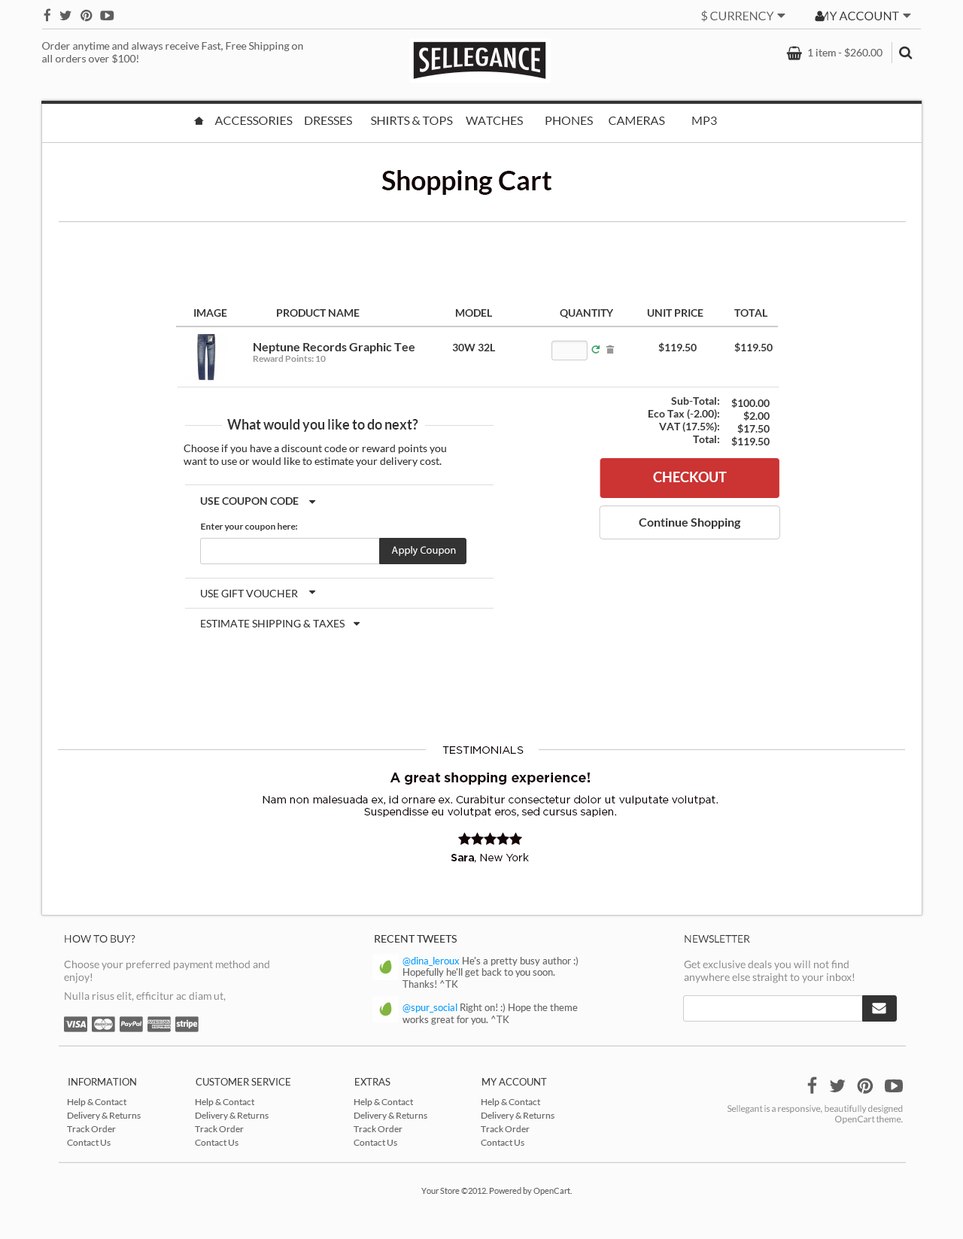
<style>
.page{position:relative;width:963px;height:1239px;background:#ffffff}
.page>*{position:absolute;margin:0}
.t1{font:12px "Lato-Regular";color:#5e5e5e;text-transform:uppercase}
.t2{font:12px "Lato-Regular";color:#333333;text-transform:uppercase}
.t3{font:10.5px "Lato-Regular";color:#666666}
.t4{font:27.1px "Lato-Bold";color:#140606}
.t5{font:10.5px "Lato-Bold";color:#333333}
.t6{font:12px "Lato-Bold";color:#333333}
.t7{font:9px "Lato-Bold";color:#999999}
.t8{font:13.5px "Lato-Bold";color:#333333}
.t9{font:10.5px "Lato-Regular";color:#333333}
.t10{font:13.5px "Lato-Bold";color:#ffffff}
.t11{font:10.5px "Lato-Bold";color:#333333;text-transform:uppercase}
.t12{font:9px "Lato-Bold";color:#333333}
.t13{font:10.5px "MyriadPro-Regular";color:#ffffff}
.t14{font:10.5px "Lato-Regular";color:#333333;text-transform:uppercase}
.t15{font:10.5px "Gotham-Book";color:#140606}
.t16{font:13.5px "Gotham-Bold";color:#140606}
.t17{font:10.5px "Gotham-Bold";color:#140606}
.t18{font:10.5px "Lato-Regular";color:#878787}
.t19{font:9.8px "Lato-Regular";color:#666666}
.t20{font:9.8px "Lato-Regular";color:#00a2ff}
.t21{font:9.8px "Lato-Regular";color:#434343}
.t22{font:9px/13.5px "Lato-Regular";color:#666666}
.t23{font:9px "Lato-Regular";color:#878787}
.t24{font:8.3px "Lato-Regular";color:#636363}
</style>
<div class="page">
<p class="t1" style="left:701px;top:10px;width:73px;height:12px">$ currency</p>
<p class="t2" style="left:819px;top:11px;width:80px;height:9px">My Account</p>
<p class="t3" style="left:42px;top:42px;width:261px;height:21px">Order anytime and always receive Fast, Free Shipping on all orders over $100!</p>
<p class="t3" style="left:808px;top:48px;width:74px;height:9px">1 item - $260.00</p>
<p class="t2" style="left:214px;top:117px;width:79px;height:8px">accessories</p>
<p class="t2" style="left:305px;top:117px;width:47px;height:8px">dresses</p>
<p class="t2" style="left:371px;top:117px;width:82px;height:8px">shirts &amp; tops</p>
<p class="t2" style="left:466px;top:117px;width:57px;height:8px">watches</p>
<p class="t2" style="left:545px;top:117px;width:48px;height:8px">Phones</p>
<p class="t2" style="left:608px;top:117px;width:57px;height:8px">Cameras</p>
<p class="t2" style="left:692px;top:117px;width:25px;height:8px">MP3</p>
<p class="t4" style="left:381px;top:170px;width:171px;height:25px">Shopping Cart</p>
<p class="t5" style="left:194px;top:309px;width:33px;height:8px">IMAGE</p>
<p class="t5" style="left:277px;top:309px;width:82px;height:8px">PRODUCT NAME</p>
<p class="t5" style="left:455px;top:309px;width:38px;height:8px">MODEL</p>
<p class="t5" style="left:560px;top:309px;width:53px;height:9px">QUANTITY</p>
<p class="t5" style="left:647px;top:309px;width:56px;height:8px">UNIT PRICE</p>
<p class="t5" style="left:734px;top:309px;width:34px;height:8px">TOTAL</p>
<p class="t6" style="left:253px;top:343px;width:162px;height:10px">Neptune Records Graphic Tee</p>
<p class="t5" style="left:452px;top:344px;width:44px;height:7px">30W 32L</p>
<p class="t5" style="left:658px;top:342px;width:38px;height:10px">$119.50</p>
<p class="t5" style="left:734px;top:342px;width:38px;height:10px">$119.50</p>
<p class="t7" style="left:253px;top:355px;width:73px;height:7px">Reward Points: 10</p>
<p class="t5" style="left:648px;top:397px;width:71px;height:46px;text-align:right">Sub-Total:<br>Eco Tax (-2.00):<br>VAT (17.5%):<br>Total:</p>
<p class="t5" style="left:731px;top:398px;width:38px;height:48px;text-align:right">$100.00<br>$2.00<br>$17.50<br>$119.50</p>
<p class="t8" style="left:227px;top:419px;width:191px;height:13px">What would you like to do next?</p>
<p class="t9" style="left:184px;top:444px;width:262px;height:22px">Choose if you have a discount code or reward points you want to use or would like to estimate your delivery cost.</p>
<p class="t10" style="left:653px;top:472px;width:74px;height:10px">CHECKOUT</p>
<p class="t11" style="left:200px;top:497px;width:99px;height:8px">Use coupon code</p>
<p class="t6" style="left:639px;top:518px;width:102px;height:11px">Continue Shopping</p>
<p class="t12" style="left:201px;top:523px;width:96px;height:8px">Enter your coupon here:</p>
<p class="t13" style="left:391px;top:546px;width:65px;height:10px">Apply Coupon</p>
<p class="t14" style="left:201px;top:590px;width:97px;height:7px">Use Gift Voucher</p>
<p class="t14" style="left:201px;top:620px;width:143px;height:7px">Estimate Shipping &amp; Taxes</p>
<p class="t15" style="left:442px;top:746px;width:81px;height:8px">TESTIMONIALS</p>
<p class="t16" style="left:390px;top:772px;width:200px;height:12px">A great shopping experience!</p>
<p class="t15" style="left:262px;top:795px;width:455px;height:22px;text-align:center">Nam non malesuada ex, id ornare ex. Curabitur consectetur dolor ut vulputate volutpat. Suspendisse eu volutpat eros, sed cursus sapien.</p>
<p class="t15" style="left:450px;top:853px;width:79px;height:10px"><span class="t17">Sara</span>, New York</p>
<p class="t18" style="left:64px;top:935px;width:205px;height:66px"><span class="t9">HOW TO BUY?<br></span><br>Choose your preferred payment method and enjoy!<br>Nulla risus elit, efficitur ac diam ut, sollicitudin bibendum lorem. Vivamus quis sem metus.</p>
<p class="t9" style="left:375px;top:935px;width:82px;height:7px">RECENT TWEETS</p>
<p class="t18" style="left:684px;top:935px;width:170px;height:48px"><span class="t9">NEWSLETTER<br></span><br>Get exclusive deals you will not find anywhere else straight to your inbox!</p>
<p class="t19" style="left:402px;top:956px;width:176px;height:68px"><span class="t20">@dina_leroux </span>He's a pretty busy author :) Hopefully he'll get back to you soon. Thanks! ^TK<br><br><span class="t20">@spur_social </span>Right on! :) Hope the theme works great for you. ^TK</p>
<p class="t21" style="left:68px;top:1078px;width:68px;height:7px">INFORMATION</p>
<p class="t21" style="left:196px;top:1078px;width:94px;height:7px">CUSTOMER SERVICE</p>
<p class="t21" style="left:355px;top:1078px;width:35px;height:7px">EXTRAS</p>
<p class="t21" style="left:482px;top:1078px;width:65px;height:7px">MY ACCOUNT</p>
<p class="t22" style="left:67px;top:1098px;width:74px;height:47px">Help &amp; Contact<br>Delivery &amp; Returns<br>Track Order<br>Contact Us</p>
<p class="t22" style="left:195px;top:1098px;width:73px;height:47px">Help &amp; Contact<br>Delivery &amp; Returns<br>Track Order<br>Contact Us</p>
<p class="t22" style="left:353px;top:1098px;width:74px;height:47px">Help &amp; Contact<br>Delivery &amp; Returns<br>Track Order<br>Contact Us</p>
<p class="t22" style="left:481px;top:1098px;width:73px;height:47px">Help &amp; Contact<br>Delivery &amp; Returns<br>Track Order<br>Contact Us</p>
<p class="t23" style="left:727px;top:1105px;width:175px;height:19px;text-align:right">Sellegant is a responsive, beautifully designed OpenCart theme.</p>
<p class="t24" style="left:421px;top:1187px;width:151px;height:8px">Your Store ©2012. Powered by OpenCart.</p>
</div>
